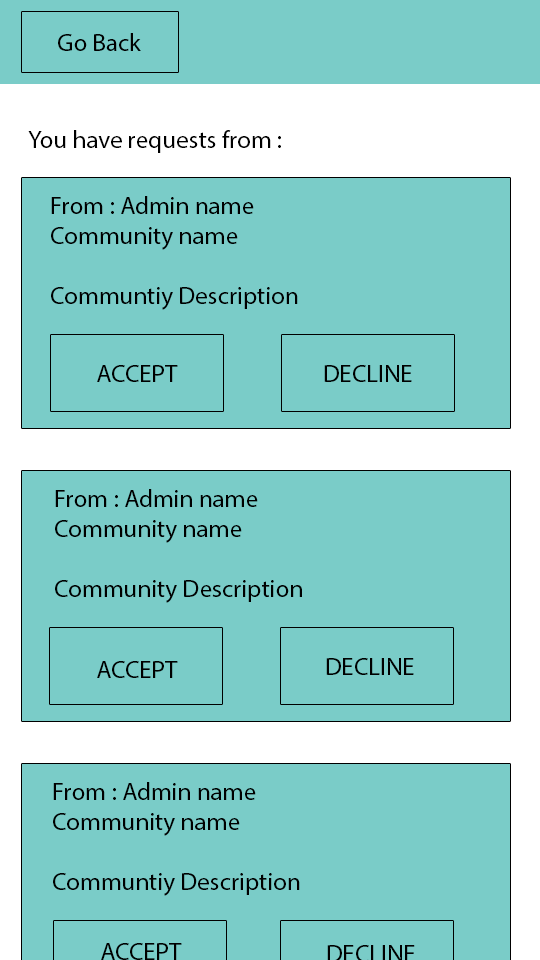
<style>
.page{position:relative;width:540px;height:960px;background:#7accc8}
.page>*{position:absolute;margin:0}
.t1{font:25px "MyriadPro-Regular";color:#000000}
</style>
<div class="page">
<p class="t1" style="left:58px;top:33px;width:83px;height:18px">Go Back</p>
<p class="t1" style="left:28px;top:130px;width:253px;height:23px">You have requests from :</p>
<p class="t1" style="left:51px;top:196px;width:247px;height:114px">From : Admin name<br>Community name<br><br>Communtiy Description</p>
<p class="t1" style="left:97px;top:365px;width:81px;height:17px">ACCEPT</p>
<p class="t1" style="left:324px;top:365px;width:88px;height:17px">DECLINE</p>
<p class="t1" style="left:55px;top:489px;width:247px;height:114px">From : Admin name<br>Community name<br><br>Community Description</p>
<p class="t1" style="left:97px;top:661px;width:81px;height:17px">ACCEPT</p>
<p class="t1" style="left:326px;top:658px;width:88px;height:17px">DECLINE</p>
<p class="t1" style="left:53px;top:782px;width:247px;height:114px">From : Admin name<br>Community name<br><br>Communtiy Description</p>
<p class="t1" style="left:101px;top:943px;width:81px;height:17px">ACCEPT</p>
<p class="t1" style="left:327px;top:945px;width:88px;height:17px">DECLINE</p>
</div>
